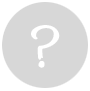
<style>
.page{position:relative;width:90px;height:91px;background:#d7d7d7}
.page>*{position:absolute;margin:0}
.t1{font:59.6px "Oregano-Regular";color:#ffffff}
</style>
<div class="page">
<p class="t1" style="left:31px;top:25px;width:29px;height:43px">?</p>
</div>
